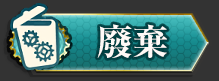
<style>
.page{position:relative;width:219px;height:81px;background:#333333}
.page>*{position:absolute;margin:0}
.t1{font:36px "RyuminPro-ExBold";color:#fffaf7}
</style>
<div class="page">
<p class="t1" style="left:97px;top:24px;width:70px;height:34px">廢棄</p>
</div>
